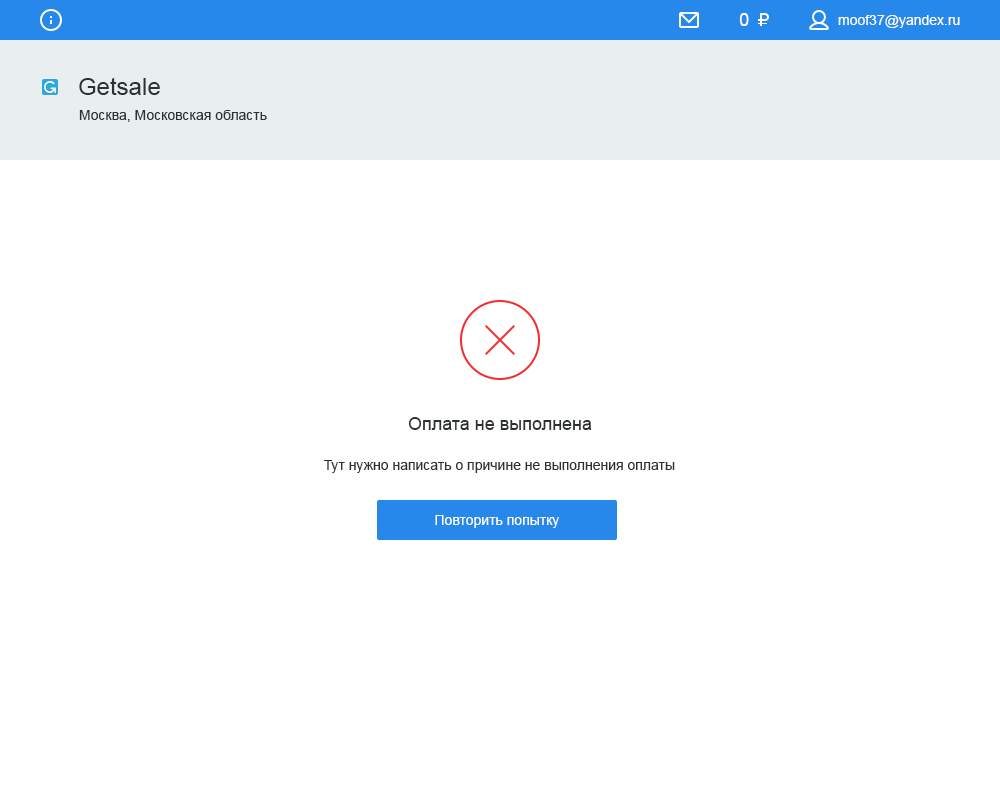
<style>
.page{position:relative;width:1000px;height:800px;background:#ffffff}
.page>*{position:absolute;margin:0}
.t1{font:18px "ArialMT";color:#ffffff}
.t2{font:14px "ArialMT";color:#ffffff}
.t3{font:24px "ArialMT";color:#2c3133}
.t4{font:14px "ArialMT";color:#2c3133}
.t5{font:18px "ArialMT";color:#2c3133}
</style>
<div class="page">
<p class="t1" style="left:739px;top:13px;width:10px;height:13px">0</p>
<p class="t2" style="left:838px;top:15px;width:122px;height:13px">moof37@yandex.ru</p>
<p class="t3" style="left:79px;top:77px;width:81px;height:18px">Getsale</p>
<p class="t4" style="left:79px;top:110px;width:188px;height:12px">Москва, Московская область</p>
<p class="t5" style="left:408px;top:417px;width:184px;height:13px">Оплата не выполнена</p>
<p class="t4" style="left:323px;top:460px;width:352px;height:13px">Тут нужно написать о причине не выполнения оплаты</p>
<p class="t2" style="left:435px;top:515px;width:124px;height:13px">Повторить попытку</p>
</div>
